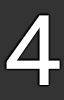
<style>
.page{position:relative;width:64px;height:100px;background:#333333}
.page>*{position:absolute;margin:0}
.t1{font:100px "Amiko-Regular";color:#ffffff}
</style>
<div class="page">
<p class="t1" style="left:6px;top:15px;width:54px;height:70px">4</p>
</div>
